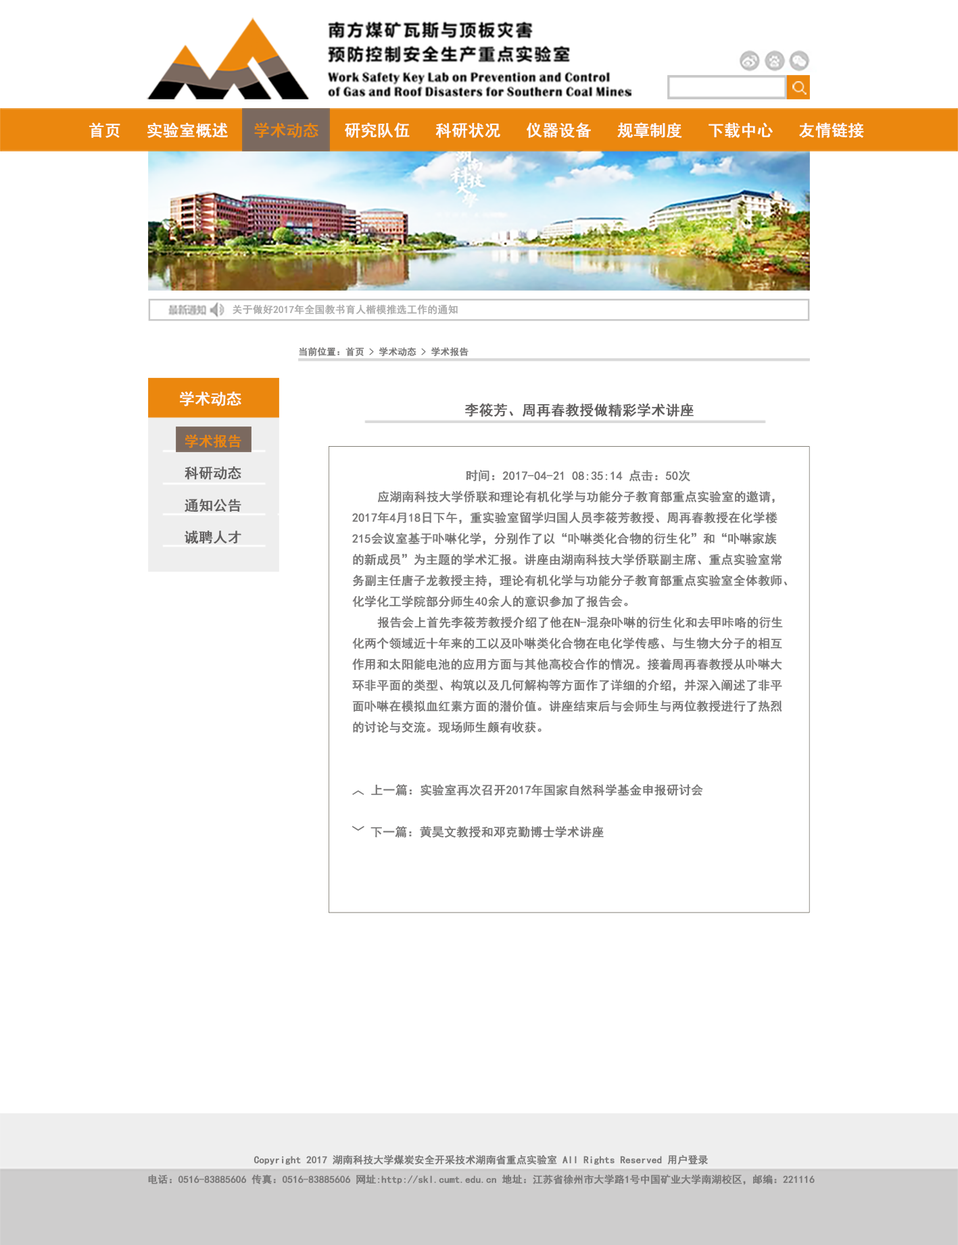
<style>
.page{position:relative;width:958px;height:1245px;background:#ffffff}
.page>*{position:absolute;margin:0}
.t1{font:16px "SimHei";color:#fffcfc;font-weight:bold}
.t2{font:16px "SimHei";color:#eb870e;font-weight:bold}
.t3{font:10px "SimHei";color:#acacac;font-weight:bold}
.t4{font:9.2px "SimHei";color:#787777;font-weight:bold}
.t5{font:15.3px "SimHei";color:#fefbfb;font-weight:bold}
.t6{font:12px "SimHei";color:#787777;font-weight:bold}
.t7{font:10px "SimHei";color:#787777;font-weight:bold}
.t8{font:14px "SimHei";color:#605e5e;font-weight:bold}
.t9{font:12px "AdobeHeitiStd-Regular";color:#787777;font-weight:bold}
.t10{font:14px/31.9px "SimHei";color:#605e5e;font-weight:bold}
.t11{font:14px/31.9px "SimHei";color:#eb870e;font-weight:bold}
.t12{font:9.9px/9.9px "SimHei";color:#787777;font-weight:bold}
</style>
<div class="page">
<p class="t1" style="left:89px;top:122px;width:775px;height:16px">首页   实验室概述 <span class="t2">  学术动态 </span>  研究队伍   科研状况   仪器设备   规章制度   下载中心   友情链接</p>
<p class="t3" style="left:233px;top:304px;width:225px;height:10px">关于做好2017年全国教书育人楷模推选工作的通知</p>
<p class="t4" style="left:299px;top:347px;width:169px;height:9px">当前位置：首页 &gt; 学术动态 &gt; 学术报告</p>
<p class="t5" style="left:180px;top:391px;width:61px;height:15px">学术动态</p>
<p class="t6" style="left:352px;top:403px;width:435px;height:435px"><span class="t7">                </span><span class="t8">  李筱芳、周再春教授做精彩学术讲座<br></span>                  <br>                  <br>                  时间：2017-04-21 08:35:14 点击：50次<br>    应湖南科技大学侨联和理论有机化学与功能分子教育部重点实验室的邀请，<br>2017年4月18日下午，重实验室留学归国人员李筱芳教授、周再春教授在化学楼<br>215会议室基于卟啉化学，分别作了以“卟啉类化合物的衍生化”和“卟啉家族<br>的新成员”为主题的学术汇报。讲座由湖南科技大学侨联副主席、重点实验室常<br>务副主任唐子龙教授主持，理论有机化学与功能分子教育部重点实验室全体教师、<br>化学化工学院部分师生40余人的意识参加了报告会。                                                <br>    报告会上首先李筱芳教授介绍了他在N-混杂卟啉的衍生化和去甲咔咯的衍生<br>化两个领域近十年来的工以及卟啉类化合物在电化学传感、与生物大分子的相互<br>作用和太阳能电池的应用方面与其他高校合作的情况。接着周再春教授从卟啉大<br>环非平面的类型、构筑以及几何解构等方面作了详细的介绍，并深入阐述了非平<br>面卟啉在模拟血红素方面的潜价值。讲座结束后与会师生与两位教授进行了热烈<br>的讨论与交流。现场师生颇有收获。 <br><br><br>︿ 上一篇：实验室再次召开2017年国家自然科学基金申报研讨会 <br><br><span class="t9">﹀  </span>下一篇：黄昊文教授和邓克勤博士学术讲座</p>
<p class="t10" style="left:185px;top:434px;width:56px;height:110px"><span class="t11">学术报告 <br></span>科研动态 <br>通知公告 <br>诚聘人才</p>
<p class="t12" style="left:148px;top:1154px;width:666px;height:31px;text-align:center">Copyright 2017 湖南科技大学煤炭安全开采技术湖南省重点实验室 All Rights Reserved 用户登录 <br><br>电话：0516-83885606 传真：0516-83885606 网址:http://skl.cumt.edu.cn 地址：江苏省徐州市大学路1号中国矿业大学南湖校区，邮编：221116</p>
</div>
